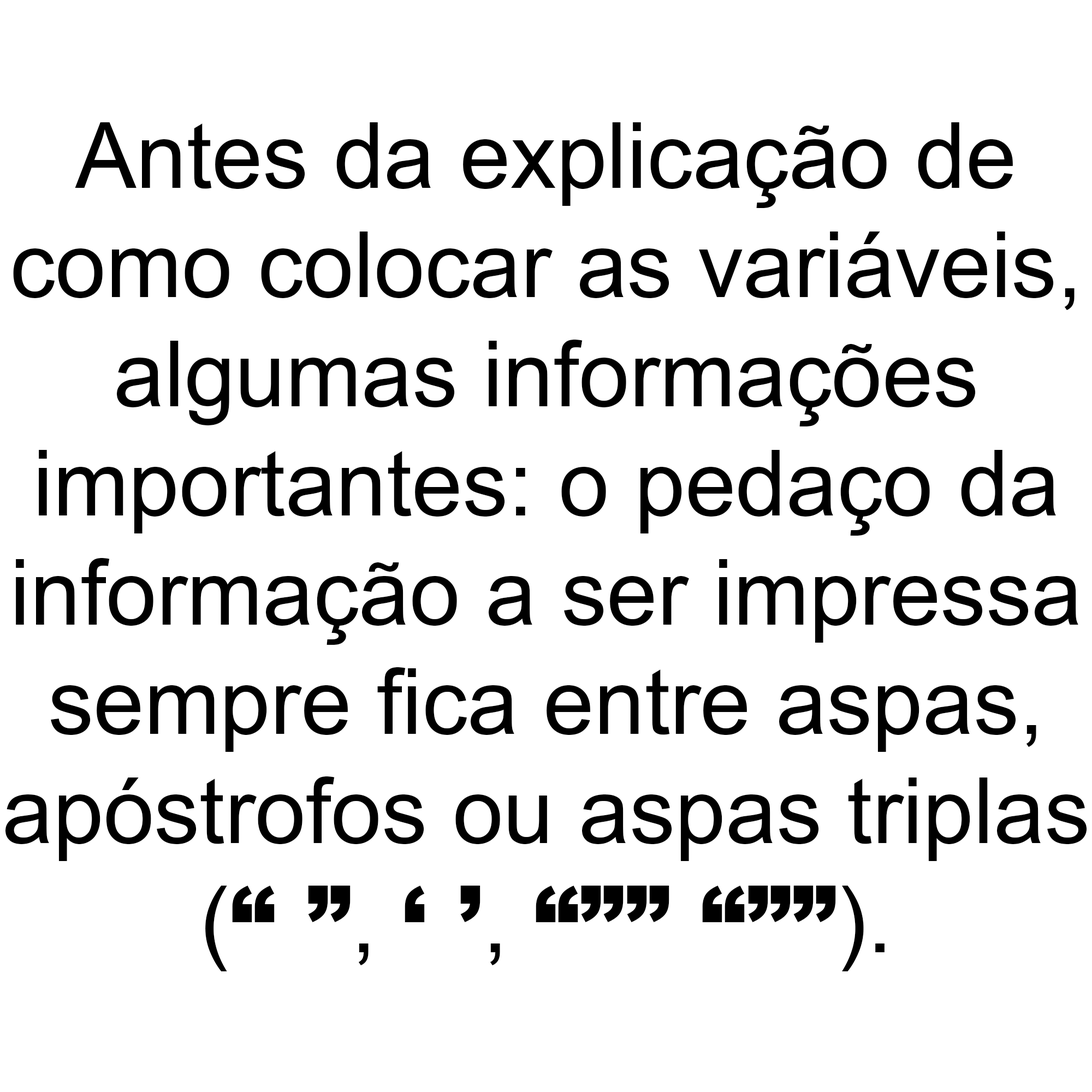
<style>
.page{position:relative;width:1092px;height:1092px;background:#ffffff}
.page>*{position:absolute;margin:0}
.t1{font:91px "ArialMT";color:#000000}
.t2{font:91px "Arial-Black";color:#000000}
</style>
<div class="page">
<p class="t1" style="left:5px;top:122px;width:1082px;height:849px;text-align:center">Antes da explicação de<br>como colocar as variáveis,<br>algumas informações<br>importantes: o pedaço da<br>informação a ser impressa<br>sempre fica entre aspas,<br>apóstrofos ou aspas triplas<br>(<span class="t2">“ ”</span>, <span class="t2">‘ ’</span>, <span class="t2">“”” “””</span>).</p>
</div>
